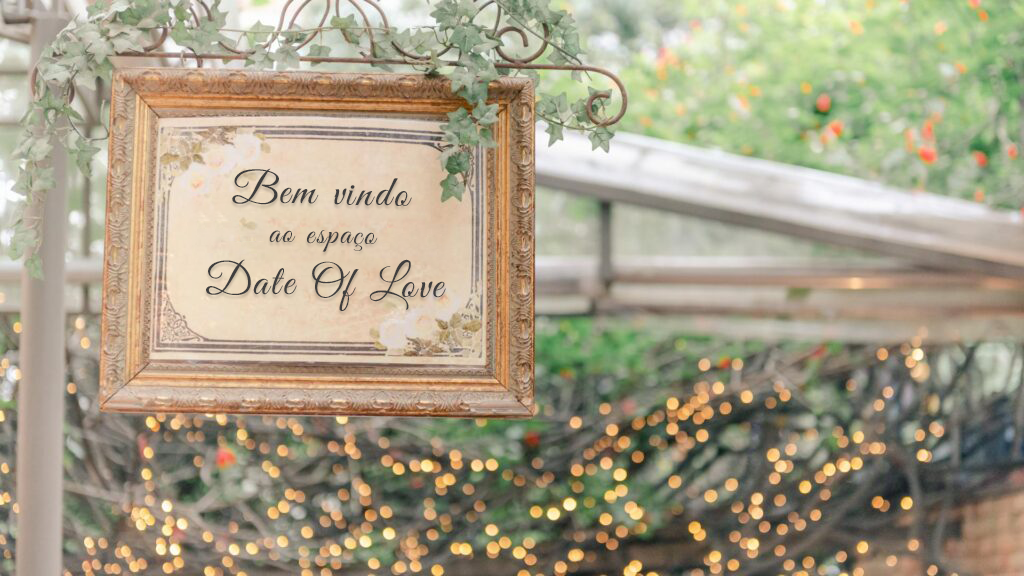
<style>
.page{position:relative;width:1024px;height:576px}
.page>*{position:absolute;margin:0}
.t1{font:43.5px "GreatVibes-Regular";letter-spacing:0.06em;color:#3f3e3e}
.t2{font:32.6px "GreatVibes-Regular";letter-spacing:0.06em;color:#3f3e3e}
</style>
<div class="page">
<p class="t1" style="left:206px;top:168px;width:240px;height:143px;text-align:center;rotate:1deg">Bem vindo<br><span class="t2">ao espaço</span><br>Date Of Love</p>
</div>
